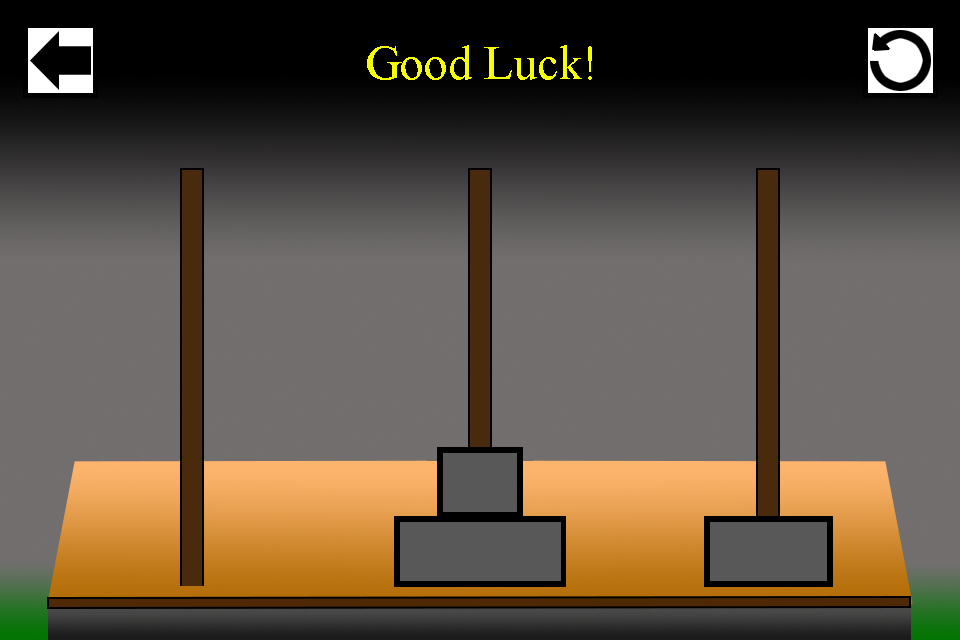
<style>
.page{position:relative;width:960px;height:640px}
.page>*{position:absolute;margin:0}
.t1{font:48px "TimesNewRomanPSMT";color:#f6ff00}
</style>
<div class="page">
<p class="t1" style="left:367px;top:45px;width:225px;height:35px">Good Luck!</p>
</div>
